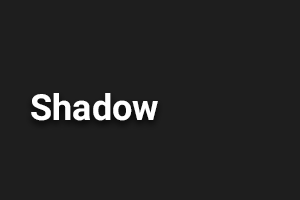
<style>
.page{position:relative;width:300px;height:200px;background:#1e1e1e}
.page>*{position:absolute;margin:0}
.t1{font:36px "Roboto-Bold";color:#ffffff}
</style>
<div class="page">
<p class="t1" style="left:31px;top:93px;width:127px;height:28px">Shadow</p>
</div>
